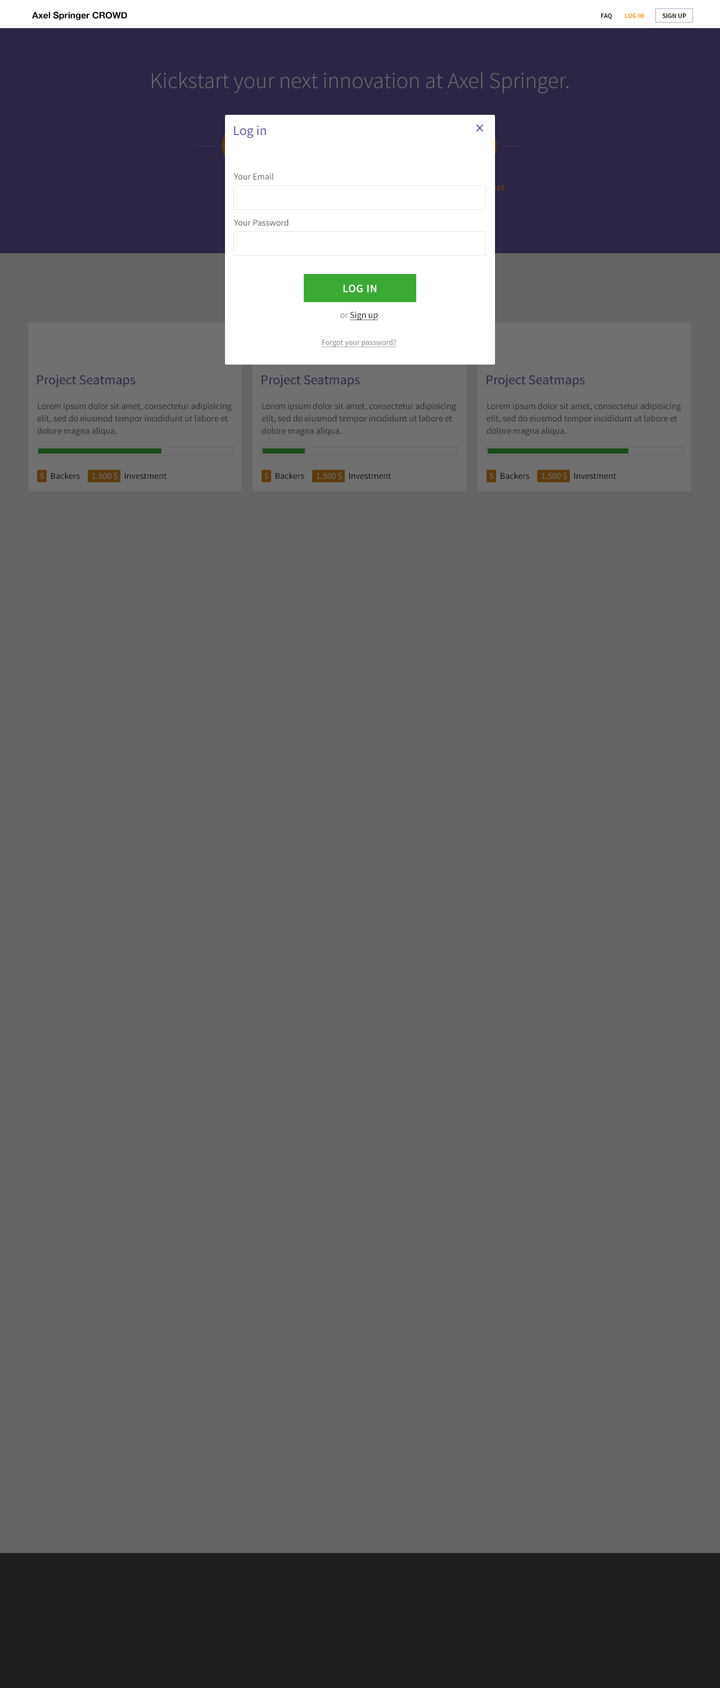
<style>
.page{position:relative;width:720px;height:1688px;background:#656565}
.page>*{position:absolute;margin:0}
.t1{font:9px "HelveticaNeue-Bold";color:#000000}
.t2{font:6.8px "SourceSansPro-Semibold";color:#000000;text-transform:uppercase}
.t3{font:6.8px "SourceSansPro-Semibold";color:#f39200;text-transform:uppercase}
.t4{font:22.5px "SourceSansPro-Light";color:#707070}
.t5{font:13.5px "SourceSansPro-Regular";color:#6455a0}
.t6{font:18px "SourceSansPro-Regular";color:#6455a0}
.t7{font:9px "SourceSansPro-Regular";color:#585858}
.t8{font:11.2px "SourceSansPro-Semibold";letter-spacing:0.032em;color:#ffffff;text-transform:uppercase}
.t9{font:7.9px/27px "SourceSansPro-Regular";color:#878787;text-decoration:underline}
.t10{font:9px/27px "SourceSansPro-Regular";color:#868686}
.t11{font:9px/27px "SourceSansPro-Regular";color:#000000;text-decoration:underline}
.t12{font:13.5px "SourceSansPro-Regular";color:#2c2546}
.t13{font:9px/12.4px "SourceSansPro-Regular";color:#272727}
.t14{font:9px "SourceSansPro-Regular";color:#707070}
.t15{font:9px "SourceSansPro-Regular";color:#000000}
</style>
<div class="page">
<p class="t1" style="left:32px;top:12px;width:95px;height:8px">Axel Springer CROWD</p>
<p class="t2" style="left:601px;top:14px;width:85px;height:5px">FAQ         <span class="t3">Log IN</span>             Sign Up</p>
<p class="t4" style="left:152px;top:71px;width:417px;height:22px">Kickstart your next innovation at Axel Springer.</p>
<p class="t5" style="left:234px;top:125px;width:32px;height:13px">Log in</p>
<p class="t6" style="left:476px;top:124px;width:8px;height:8px">×</p>
<p class="t7" style="left:234px;top:173px;width:40px;height:7px">Your Email</p>
<p class="t7" style="left:234px;top:219px;width:55px;height:7px">Your Password</p>
<p class="t8" style="left:343px;top:285px;width:33px;height:7px">Log in</p>
<p class="t9" style="left:321px;top:312px;width:76px;height:35px;text-align:center"><span class="t10">or </span><span class="t11">Sign up<br></span>Forgot your password?</p>
<p class="t12" style="left:37px;top:375px;width:99px;height:13px">Project Seatmaps</p>
<p class="t12" style="left:262px;top:375px;width:98px;height:13px">Project Seatmaps</p>
<p class="t12" style="left:487px;top:375px;width:98px;height:13px">Project Seatmaps</p>
<p class="t13" style="left:37px;top:402px;width:195px;height:34px">Lorem ipsum dolor sit amet, consectetur adipisicing elit, sed do eiusmod tempor incididunt ut labore et dolore magna aliqua.</p>
<p class="t13" style="left:262px;top:402px;width:194px;height:34px">Lorem ipsum dolor sit amet, consectetur adipisicing elit, sed do eiusmod tempor incididunt ut labore et dolore magna aliqua.</p>
<p class="t13" style="left:487px;top:402px;width:194px;height:34px">Lorem ipsum dolor sit amet, consectetur adipisicing elit, sed do eiusmod tempor incididunt ut labore et dolore magna aliqua.</p>
<p class="t14" style="left:40px;top:472px;width:4px;height:7px">5</p>
<p class="t15" style="left:51px;top:472px;width:29px;height:7px">Backers</p>
<p class="t14" style="left:92px;top:472px;width:26px;height:8px">1.500 $</p>
<p class="t15" style="left:125px;top:472px;width:41px;height:7px">Investment</p>
<p class="t14" style="left:264px;top:472px;width:4px;height:7px">5</p>
<p class="t15" style="left:276px;top:472px;width:28px;height:7px">Backers</p>
<p class="t14" style="left:317px;top:472px;width:25px;height:8px">1.500 $</p>
<p class="t15" style="left:349px;top:472px;width:42px;height:7px">Investment</p>
<p class="t14" style="left:489px;top:472px;width:4px;height:7px">5</p>
<p class="t15" style="left:501px;top:472px;width:28px;height:7px">Backers</p>
<p class="t14" style="left:542px;top:472px;width:25px;height:8px">1.500 $</p>
<p class="t15" style="left:574px;top:472px;width:42px;height:7px">Investment</p>
</div>
